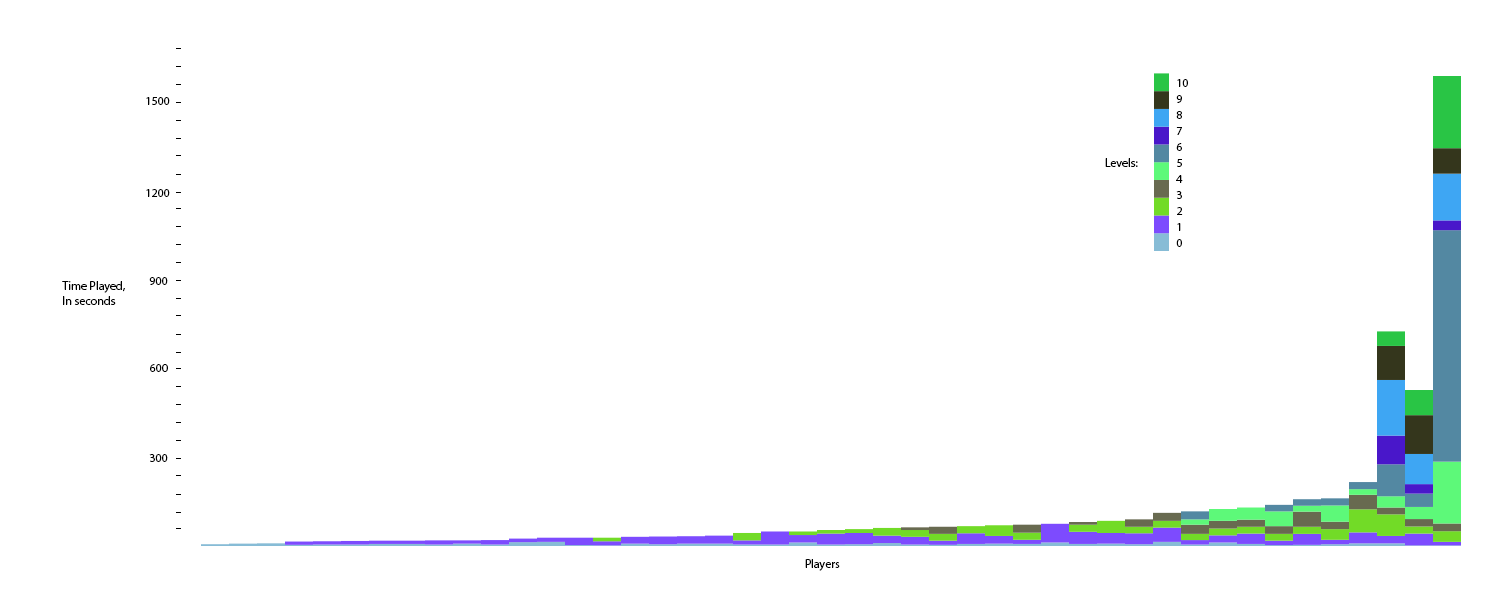
<style>
.page{position:relative;width:1500px;height:600px;background:#ffffff}
.page>*{position:absolute;margin:0}
.t1{font:12px/16px "MyriadPro-Regular";color:#000000}
.t2{font:12px "MyriadPro-Regular";color:#000000}
</style>
<div class="page">
<p class="t1" style="left:1176px;top:79px;width:12px;height:168px">10<br>9<br>8<br>7<br>6<br>5<br>4<br>3<br>2<br>1<br>0</p>
<p class="t2" style="left:146px;top:97px;width:24px;height:8px">1500</p>
<p class="t2" style="left:1105px;top:158px;width:33px;height:9px">Levels:</p>
<p class="t2" style="left:146px;top:189px;width:24px;height:8px">1200</p>
<p class="t2" style="left:62px;top:281px;width:63px;height:24px">Time Played, <br>In seconds</p>
<p class="t2" style="left:149px;top:277px;width:19px;height:8px">900</p>
<p class="t2" style="left:150px;top:364px;width:18px;height:8px">600</p>
<p class="t2" style="left:149px;top:454px;width:19px;height:8px">300</p>
<p class="t2" style="left:805px;top:559px;width:35px;height:12px">Players</p>
</div>
